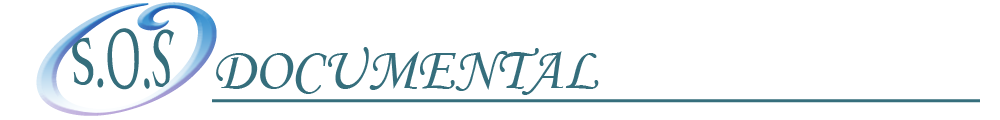
<style>
.page{position:relative;width:1000px;height:120px;background:#ffffff}
.page>*{position:absolute;margin:0}
.t1{font:227.2px "Harrington"}
.t2{font:91.9px "ArabicTypesetting";color:#356e7c;scale:1.04 1}
.t3{font:60px "MonotypeCorsiva";color:#356e7c;text-decoration:underline}
</style>
<div class="page">
<p class="t1" style="left:36px;top:2px;width:181px;height:114px;rotate:17deg">O</p>
<p class="t2" style="left:72px;top:28px;width:102px;height:62px;rotate:-1deg">S.O.S</p>
<p class="t3" style="left:212px;top:47px;width:768px;height:56px">DOCUMENTAL</p>
</div>
